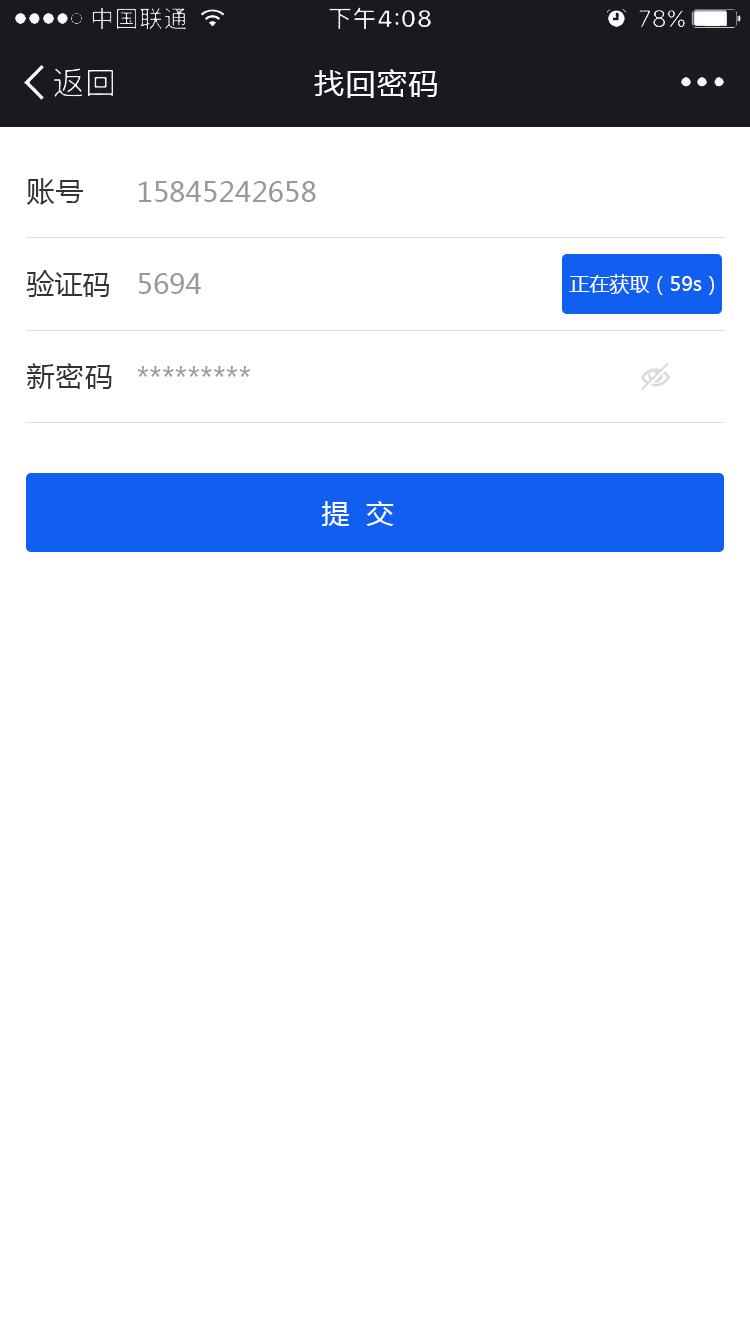
<style>
.page{position:relative;width:750px;height:1334px;background:#ffffff}
.page>*{position:absolute;margin:0}
.t1{font:30px "MicrosoftYaHei";letter-spacing:0.05em;color:#fffefe}
.t2{font:28px "MicrosoftYaHei";letter-spacing:0.05em;color:#333333}
.t3{font:28px "MicrosoftYaHei";color:#999999}
.t4{font:28px "MicrosoftYaHei";color:#333333}
.t5{font:20px "MicrosoftYaHei";color:#ffffff}
.t6{font:28px "MicrosoftYaHei";color:#ffffff}
</style>
<div class="page">
<p class="t1" style="left:314px;top:69px;width:123px;height:29px">找回密码</p>
<p class="t2" style="left:26px;top:178px;width:57px;height:27px">账号</p>
<p class="t3" style="left:139px;top:181px;width:177px;height:21px">15845242658</p>
<p class="t4" style="left:26px;top:270px;width:83px;height:27px">验证码</p>
<p class="t3" style="left:138px;top:273px;width:63px;height:21px">5694</p>
<p class="t5" style="left:569px;top:274px;width:145px;height:21px">正在获取（59s）</p>
<p class="t2" style="left:27px;top:363px;width:85px;height:26px">新密码</p>
<p class="t3" style="left:137px;top:366px;width:114px;height:11px">*********</p>
<p class="t6" style="left:321px;top:501px;width:73px;height:25px">提  交</p>
</div>
